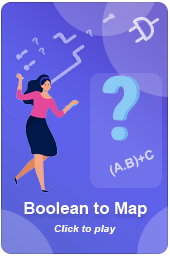
<style>
.page{position:relative;width:170px;height:256px}
.page>*{position:absolute;margin:0}
.t1{font:9.9px "Arial-BoldMT";color:#bcb8ee}
.t2{font:9.9px "Arial-BoldMT";color:#adacf0}
.t3{font:9.9px "Arial-BoldMT";color:#adacf1}
.t4{font:12.9px "Arial-BoldMT";color:#d6d7f9}
.t5{font:16.7px "Arial-BoldMT";color:#ffffff}
.t6{font:10.4px "Arial-BoldItalicMT";color:#ffffff}
</style>
<div class="page">
<p class="t1" style="left:86px;top:29px;width:7px;height:8px;rotate:-36deg">?</p>
<p class="t2" style="left:32px;top:37px;width:7px;height:8px;rotate:-36deg">?</p>
<p class="t3" style="left:38px;top:47px;width:8px;height:8px;rotate:-36deg">?</p>
<p class="t4" style="left:110px;top:150px;width:44px;height:27px;rotate:-21deg">(A.B)+C</p>
<p class="t5" style="left:24px;top:202px;width:123px;height:15px">Boolean to Map</p>
<p class="t6" style="left:54px;top:225px;width:62px;height:9px">Click to play</p>
</div>
